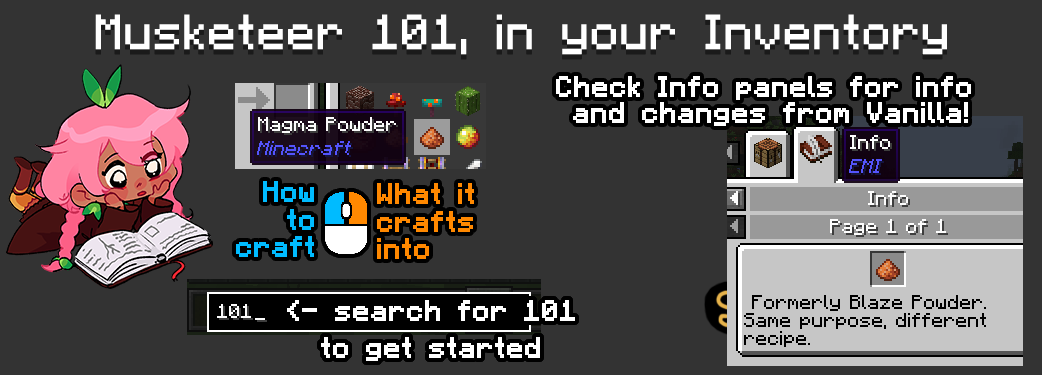
<style>
.page{position:relative;width:1042px;height:375px;background:#333333}
.page>*{position:absolute;margin:0}
.t1{font:39.1px "Minecraftia";color:#ffffff;font-weight:bold}
.t2{font:22.7px/25.6px "Minecraftia";color:#ffffff;font-weight:bold}
.t3{font:22.7px/27.6px "Minecraftia";color:#00bbff;font-weight:bold}
.t4{font:22.7px/27.6px "Minecraftia";color:#ff8800;font-weight:bold}
.t5{font:22.7px/36.6px "Minecraftia";color:#ffffff;font-weight:bold}
</style>
<div class="page">
<p class="t1" style="left:95px;top:14px;width:852px;height:41px">Musketeer 101, in your Inventory</p>
<p class="t2" style="left:556px;top:76px;width:415px;height:50px;text-align:center">Check Info panels for info <br>and changes from Vanilla!</p>
<p class="t3" style="left:236px;top:181px;width:78px;height:76px;text-align:right">How<br>to<br>craft</p>
<p class="t4" style="left:377px;top:183px;width:97px;height:76px">What it<br>crafts<br>into</p>
<p class="t5" style="left:287px;top:300px;width:288px;height:61px;text-align:center">&lt;- search for 101<br>to get started</p>
<p class="t5" style="left:287px;top:300px;width:288px;height:61px;text-align:center">&lt;- search for 101<br>to get started</p>
</div>
